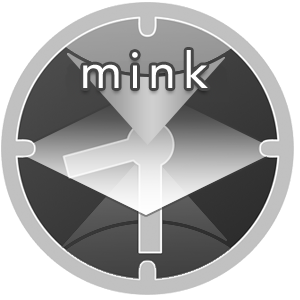
<style>
.page{position:relative;width:300px;height:300px;background:#ffffff}
.page>*{position:absolute;margin:0}
.t1{font:50px "FuturaBT-Book";letter-spacing:0.14em;color:#ffffff}
</style>
<div class="page">
<p class="t1" style="left:83px;top:50px;width:125px;height:38px">mink</p>
</div>
